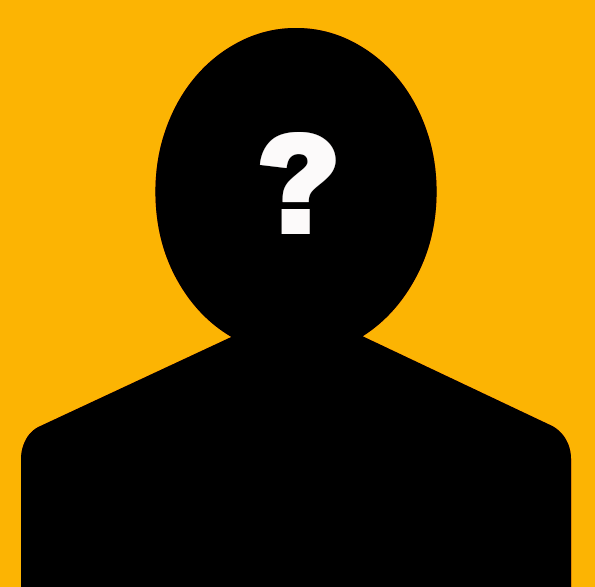
<style>
.page{position:relative;width:595px;height:587px;background:#000000}
.page>*{position:absolute;margin:0}
.t1{font:140px "Arial-Black";color:#fcfafa}
</style>
<div class="page">
<p class="t1" style="left:259px;top:132px;width:77px;height:102px">?</p>
</div>
